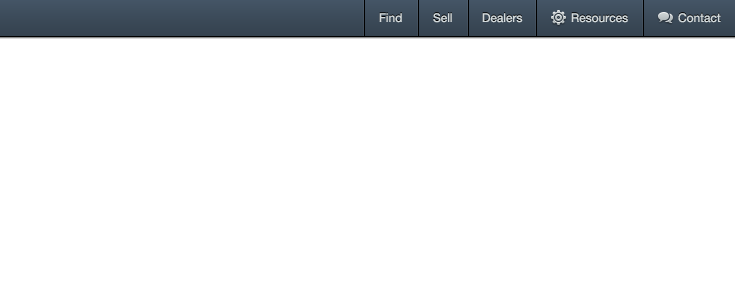
<style>
.page{position:relative;width:735px;height:300px;background:#ffffff}
.page>*{position:absolute;margin:0}
.t1{font:12px "HelveticaNeue";color:#d3dadc}
</style>
<div class="page">
<p class="t1" style="left:379px;top:13px;width:23px;height:10px">Find</p>
<p class="t1" style="left:433px;top:13px;width:19px;height:10px">Sell</p>
<p class="t1" style="left:482px;top:13px;width:41px;height:10px">Dealers</p>
<p class="t1" style="left:571px;top:13px;width:57px;height:10px">Resources</p>
<p class="t1" style="left:678px;top:13px;width:43px;height:10px">Contact</p>
</div>
